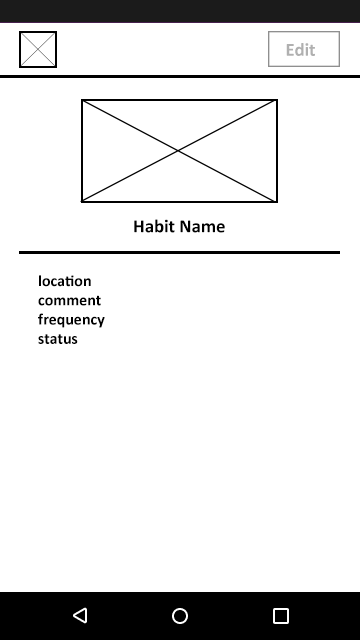
<style>
.page{position:relative;width:360px;height:640px;background:#ffffff}
.page>*{position:absolute;margin:0}
.t1{font:18.7px "Calibri-Bold";color:#b0b0b0}
.t2{font:18.7px "Calibri-Bold";color:#000000}
.t3{font:16px "Calibri-Bold";color:#000000}
</style>
<div class="page">
<p class="t1" style="left:286px;top:43px;width:29px;height:13px">Edit</p>
<p class="t2" style="left:134px;top:219px;width:91px;height:14px">Habit Name</p>
<p class="t3" style="left:38px;top:275px;width:67px;height:69px">location<br>comment<br>frequency<br>status</p>
</div>
